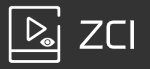
<style>
.page{position:relative;width:150px;height:69px;background:#333333}
.page>*{position:absolute;margin:0}
.t1{font:37.9px "Prime-Regular";color:#ffffff}
</style>
<div class="page">
<p class="t1" style="left:79px;top:20px;width:55px;height:29px">ZCI</p>
</div>
